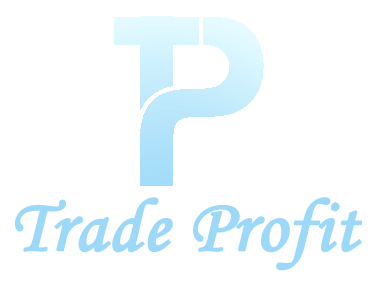
<style>
.page{position:relative;width:379px;height:281px;background:#ffffff}
.page>*{position:absolute;margin:0}
.t1{font:75px "MonotypeCorsiva";color:#9cd9f9;font-weight:bold}
</style>
<div class="page">
<p class="t1" style="left:15px;top:197px;width:348px;height:74px">Trade Profit</p>
</div>
